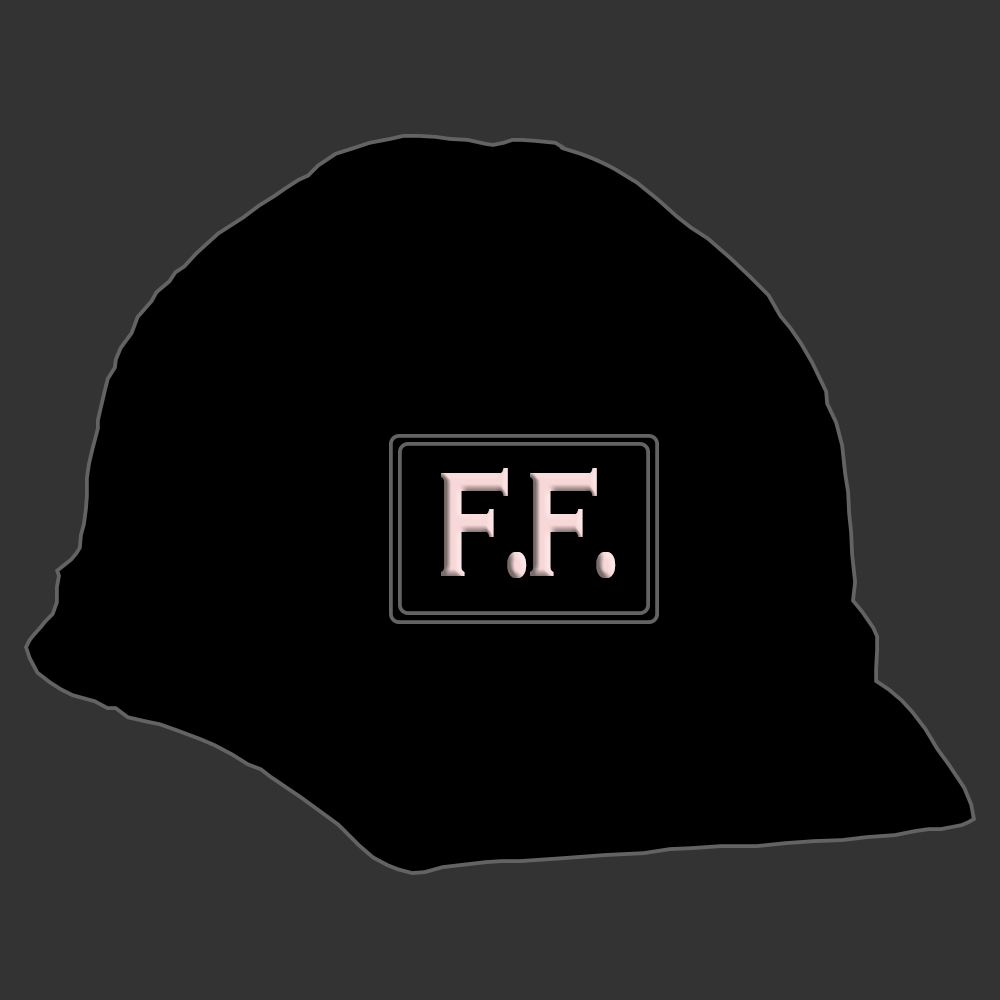
<style>
.page{position:relative;width:1000px;height:1000px;background:#333333}
.page>*{position:absolute;margin:0}
.t1{font:150px "CopperplateGothic-Bold";letter-spacing:-0.1em;color:#f7d7d7;font-weight:bold;scale:0.67 1}
</style>
<div class="page">
<p class="t1" style="left:441px;top:468px;width:175px;height:110px">F.F.</p>
</div>
